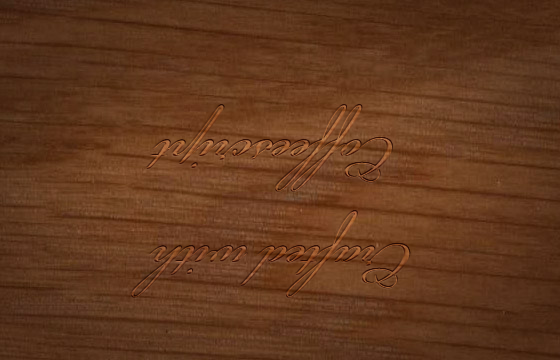
<style>
.page{position:relative;width:560px;height:360px}
.page>*{position:absolute;margin:0}
.t1{font:88.6px "BickhamScriptPro-Regular"}
</style>
<div class="page">
<p class="t1" style="left:131px;top:105px;width:279px;height:193px;text-align:center;rotate:180deg">Crafted with<br> Coffeescript</p>
</div>
